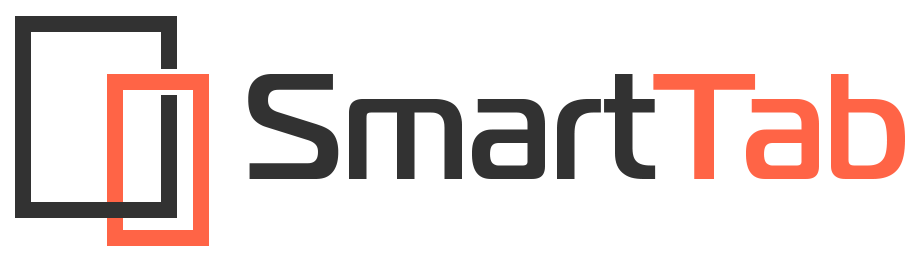
<style>
.page{position:relative;width:916px;height:262px;background:#ffffff}
.page>*{position:absolute;margin:0}
.t1{font:150px "MagistralC-Bold";color:#323232}
.t2{font:150px "MagistralC-Bold";color:#ff6446}
</style>
<div class="page">
<p class="t1" style="left:248px;top:74px;width:657px;height:105px">Smart<span class="t2">Tab</span></p>
</div>
